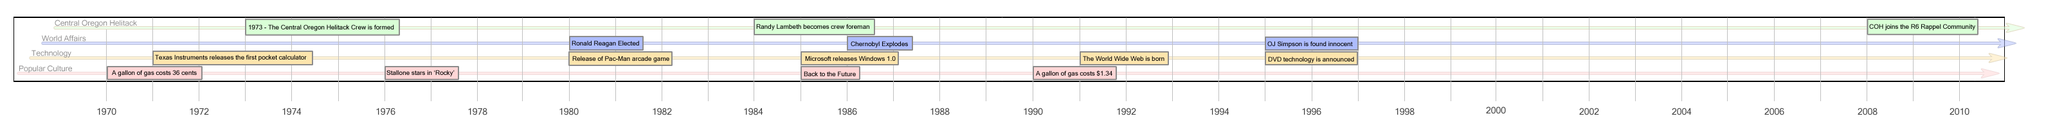
<style>
.page{position:relative;width:2064px;height:123px;background:#ffffff}
.page>*{position:absolute;margin:0}
.t1{font:7.7px "MicrosoftSansSerif";color:#8c8b8b}
.t2{font:6.4px "MicrosoftSansSerif";color:#000000}
.t3{font:9px "MicrosoftSansSerif";color:#3d3d3d}
</style>
<div class="page">
<p class="t1" style="left:55px;top:20px;width:82px;height:8px">Central Oregon Helitack</p>
<p class="t2" style="left:249px;top:24px;width:145px;height:8px">1973 - The Central Oregon Helitack Crew is formed</p>
<p class="t2" style="left:756px;top:24px;width:113px;height:7px">Randy Lambeth becomes crew foreman</p>
<p class="t2" style="left:1869px;top:24px;width:106px;height:7px">COH joins the R6 Rappel Community</p>
<p class="t1" style="left:42px;top:35px;width:44px;height:7px">World Affairs</p>
<p class="t2" style="left:572px;top:40px;width:67px;height:8px">Ronald Reagan Elected</p>
<p class="t2" style="left:851px;top:41px;width:57px;height:7px">Chernobyl Explodes</p>
<p class="t2" style="left:1267px;top:41px;width:86px;height:7px">OJ Simpson is found innocent</p>
<p class="t1" style="left:32px;top:50px;width:39px;height:8px">Technology</p>
<p class="t1" style="left:19px;top:66px;width:53px;height:7px">Popular Culture</p>
<p class="t2" style="left:155px;top:55px;width:152px;height:7px">Texas Instruments releases the first pocket calculator</p>
<p class="t2" style="left:572px;top:56px;width:97px;height:7px">Release of Pac-Man arcade game</p>
<p class="t2" style="left:805px;top:56px;width:91px;height:5px">Microsoft releases Windows 1.0</p>
<p class="t2" style="left:1083px;top:56px;width:81px;height:5px">The World Wide Web is born</p>
<p class="t2" style="left:1268px;top:57px;width:86px;height:7px">DVD technology is announced</p>
<p class="t2" style="left:112px;top:70px;width:85px;height:7px">A gallon of gas costs 36 cents</p>
<p class="t2" style="left:386px;top:70px;width:69px;height:7px">Stallone stars in ‘Rocky’</p>
<p class="t2" style="left:804px;top:71px;width:52px;height:5px">Back to the Future</p>
<p class="t2" style="left:1036px;top:71px;width:76px;height:7px">A gallon of gas costs $1.34</p>
<p class="t3" style="left:97px;top:108px;width:19px;height:8px">1970</p>
<p class="t3" style="left:190px;top:108px;width:19px;height:8px">1972</p>
<p class="t3" style="left:282px;top:108px;width:20px;height:8px">1974</p>
<p class="t3" style="left:376px;top:108px;width:19px;height:8px">1976</p>
<p class="t3" style="left:468px;top:108px;width:19px;height:8px">1978</p>
<p class="t3" style="left:559px;top:108px;width:20px;height:8px">1980</p>
<p class="t3" style="left:652px;top:108px;width:20px;height:8px">1982</p>
<p class="t3" style="left:744px;top:108px;width:19px;height:8px">1984</p>
<p class="t3" style="left:838px;top:108px;width:19px;height:8px">1986</p>
<p class="t3" style="left:930px;top:108px;width:20px;height:8px">1988</p>
<p class="t3" style="left:1023px;top:108px;width:20px;height:8px">1990</p>
<p class="t3" style="left:1117px;top:108px;width:19px;height:8px">1992</p>
<p class="t3" style="left:1210px;top:108px;width:19px;height:8px">1994</p>
<p class="t3" style="left:1302px;top:108px;width:19px;height:8px">1996</p>
<p class="t3" style="left:1395px;top:108px;width:19px;height:8px">1998</p>
<p class="t3" style="left:1486px;top:107px;width:20px;height:7px">2000</p>
<p class="t3" style="left:1579px;top:108px;width:20px;height:8px">2002</p>
<p class="t3" style="left:1671px;top:108px;width:20px;height:8px">2004</p>
<p class="t3" style="left:1764px;top:108px;width:20px;height:8px">2006</p>
<p class="t3" style="left:1857px;top:108px;width:20px;height:8px">2008</p>
<p class="t3" style="left:1949px;top:108px;width:20px;height:8px">2010</p>
</div>
